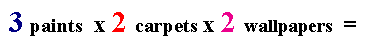
<style>
.page{position:relative;width:382px;height:50px;background:#ffffff}
.page>*{position:absolute;margin:0}
.t1{font:19px "TimesNewRomanPS-BoldMT";color:#000000}
.t2{font:30px "TimesNewRomanPS-BoldMT";color:#000082}
.t3{font:20px "TimesNewRomanPS-BoldMT";color:#000000}
.t4{font:24px "TimesNewRomanPS-BoldMT";color:#000000}
.t5{font:30px "TimesNewRomanPS-BoldMT";color:#ff0000}
.t6{font:30px "TimesNewRomanPS-BoldMT";color:#ec008c}
</style>
<div class="page">
<p class="t1" style="left:9px;top:12px;width:347px;height:24px"><span class="t2">3 </span><span class="t3">paints </span><span class="t4"> x </span><span class="t5">2 </span><span class="t3">carpets </span><span class="t4">x </span><span class="t6">2 </span>wallpapers  <span class="t4">=</span></p>
</div>
